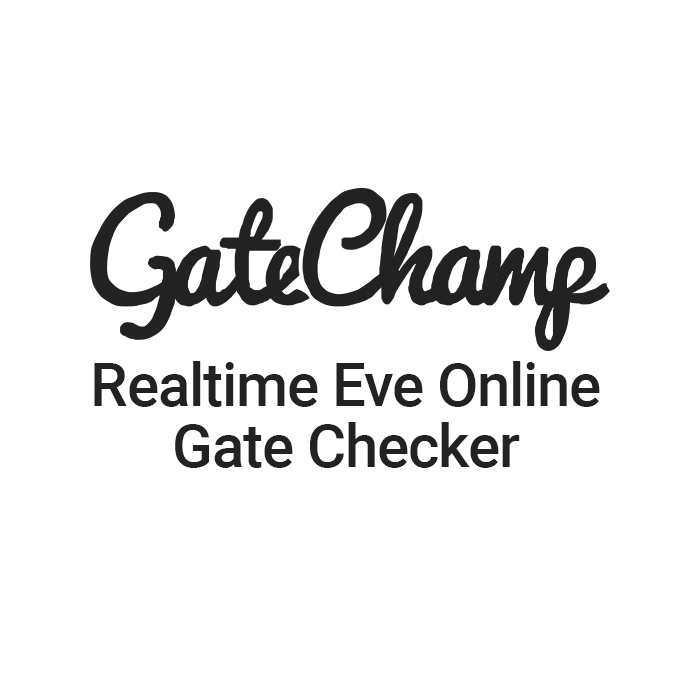
<style>
.page{position:relative;width:700px;height:700px;background:#ffffff}
.page>*{position:absolute;margin:0}
.t1{font:60px/61px "Roboto-Medium";letter-spacing:-0.02em;color:#222222}
</style>
<div class="page">
<p class="t1" style="left:94px;top:361px;width:506px;height:107px;text-align:center">Realtime Eve Online<br>Gate Checker</p>
</div>
